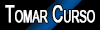
<style>
.page{position:relative;width:100px;height:30px;background:#000000}
.page>*{position:absolute;margin:0}
.t1{font:22.9px "ArialMT";color:#ffffff;font-variant:small-caps;font-weight:bold;scale:0.66 1}
</style>
<div class="page">
<p class="t1" style="left:5px;top:5px;width:90px;height:18px">Tomar Curso</p>
</div>
